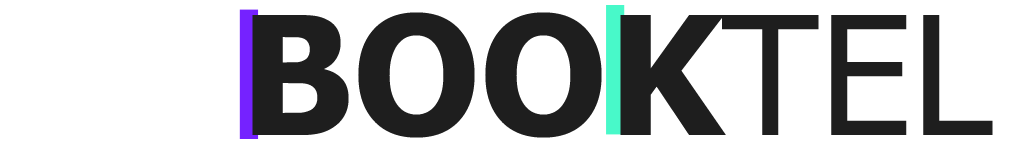
<style>
.page{position:relative;width:1024px;height:146px;background:#ffffff}
.page>*{position:absolute;margin:0}
.t1{font:165px "Tahoma-Bold";color:#1e1e1e}
.t2{font:165px "Tahoma";color:#1e1e1e}
</style>
<div class="page">
<p class="t1" style="left:252px;top:12px;width:741px;height:126px">BOOK<span class="t2">TEL</span></p>
</div>
